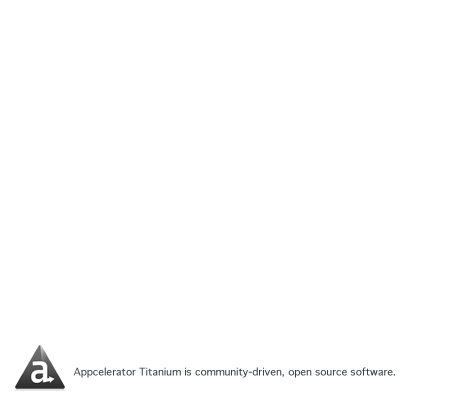
<style>
.page{position:relative;width:456px;height:398px;background:#ffffff}
.page>*{position:absolute;margin:0}
.t1{font:10px "Geneva";color:#34424c}
</style>
<div class="page">
<p class="t1" style="left:73px;top:367px;width:322px;height:11px">Appcelerator Titanium is community-driven, open source software.</p>
</div>
